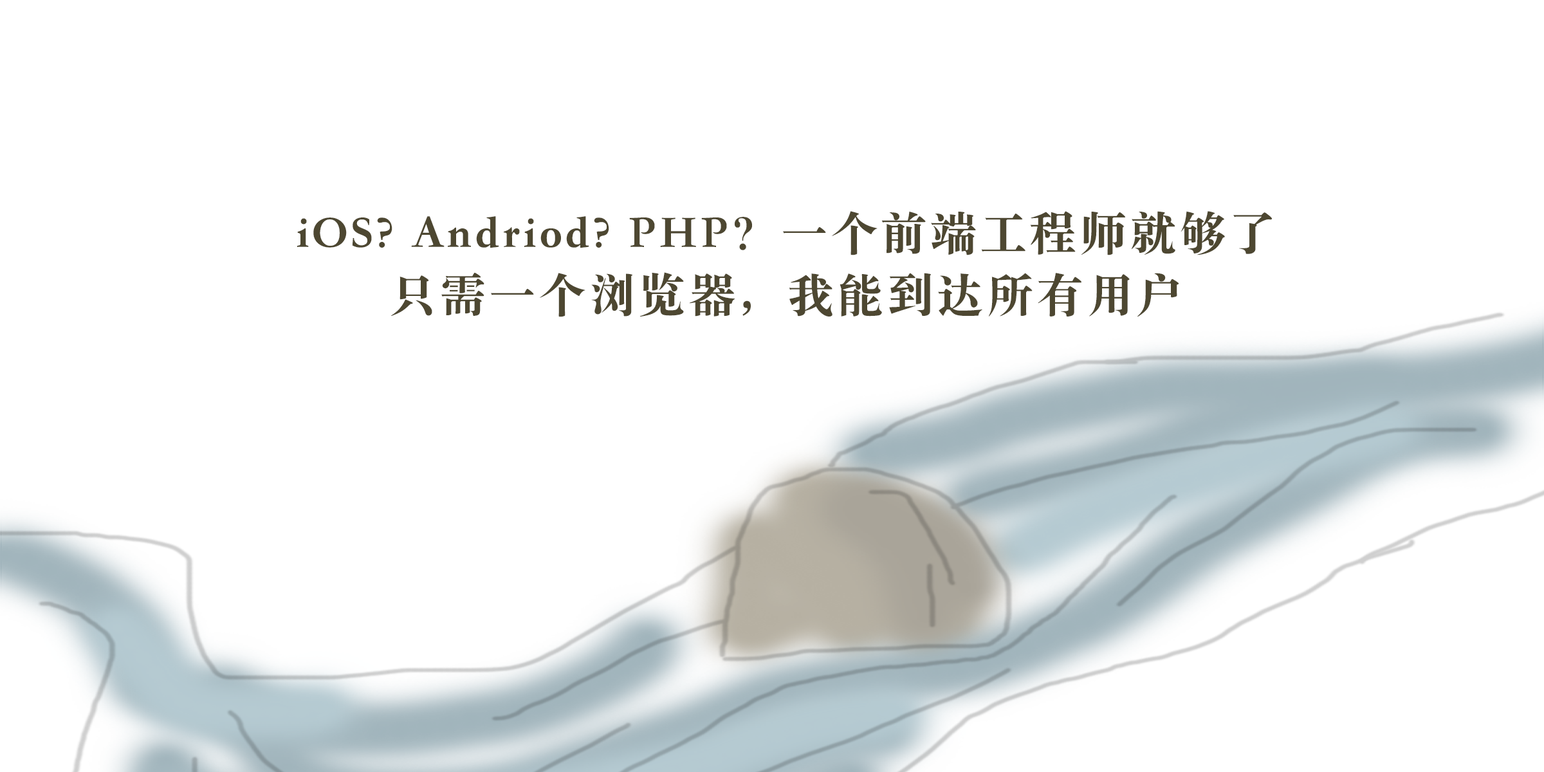
<style>
.page{position:relative;width:1544px;height:772px;background:#ffffff}
.page>*{position:absolute;margin:0}
.t1{font:46.3px/61.8px "STSongti-SC-Black";letter-spacing:0.075em;color:#4d4731}
</style>
<div class="page">
<p class="t1" style="left:297px;top:211px;width:975px;height:106px;text-align:center">iOS? Andriod? PHP？一个前端工程师就够了<br>只需一个浏览器，我能到达所有用户</p>
</div>
